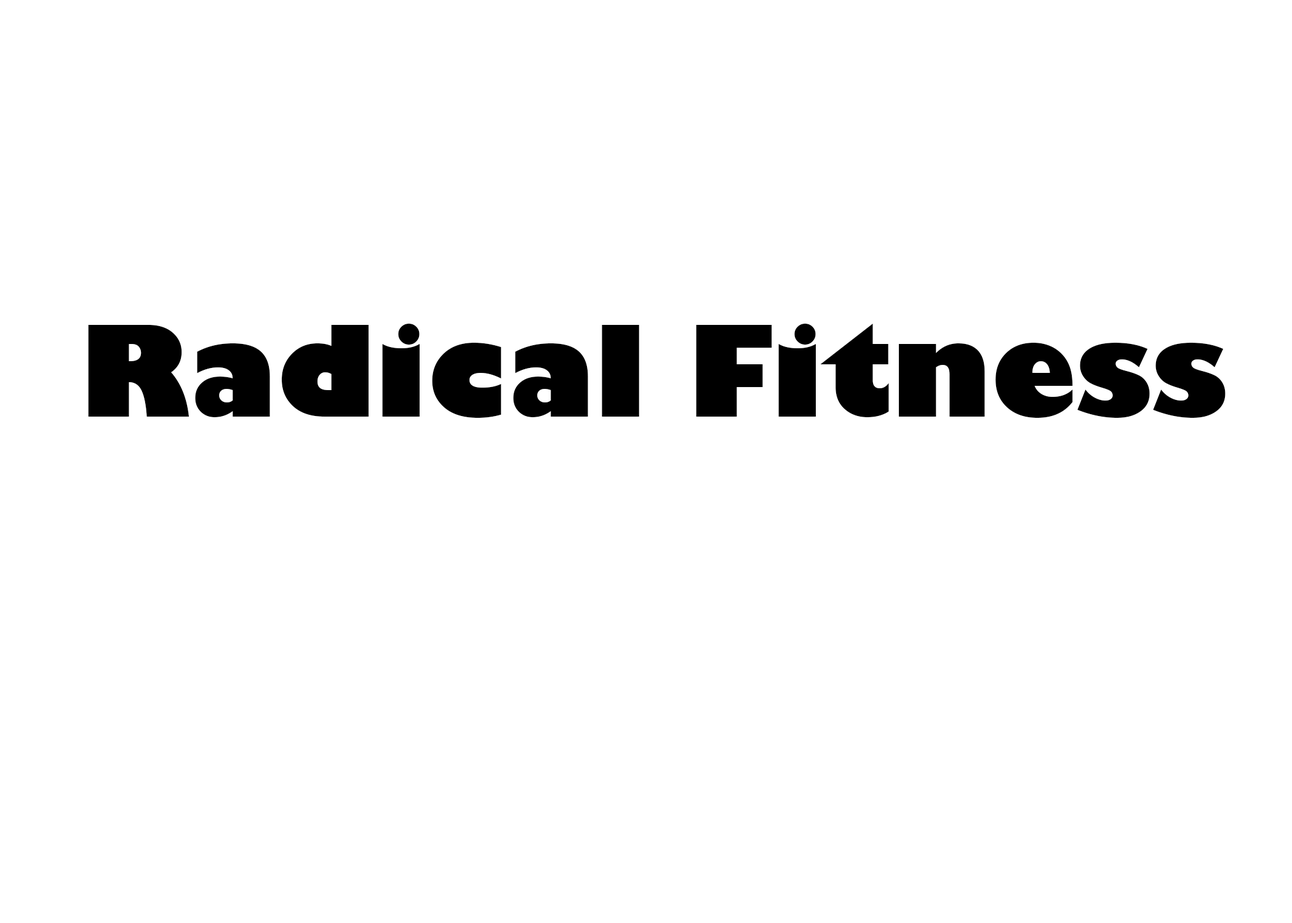
<style>
.page{position:relative;width:1292px;height:923px;background:#ffffff}
.page>*{position:absolute;margin:0}
.t1{font:123.1px "GillSans-UltraBold";color:#000000}
</style>
<div class="page">
<p class="t1" style="left:88px;top:324px;width:1138px;height:94px">Radical Fitness</p>
</div>
